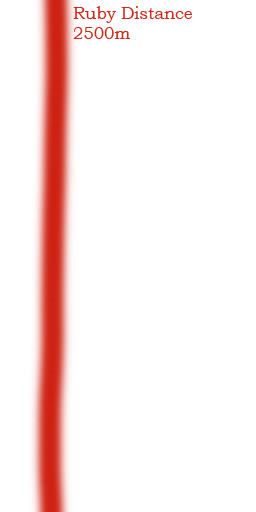
<style>
.page{position:relative;width:256px;height:512px;background:#ffffff}
.page>*{position:absolute;margin:0}
.t1{font:16.7px "BookmanOldStyle";color:#cf2a1b}
</style>
<div class="page">
<p class="t1" style="left:73px;top:6px;width:119px;height:33px">Ruby Distance<br>2500m</p>
</div>
